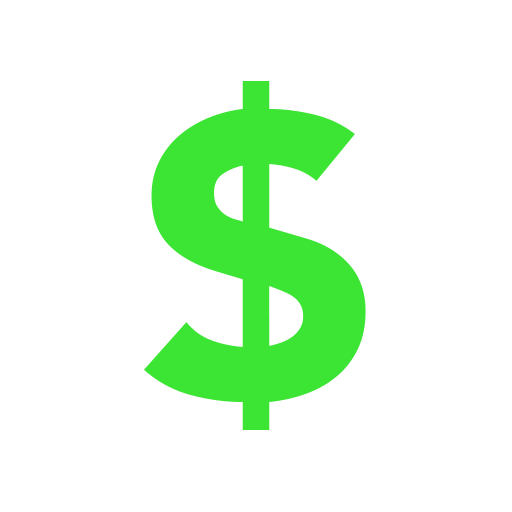
<style>
.page{position:relative;width:512px;height:512px;background:#ffffff}
.page>*{position:absolute;margin:0}
.t1{font:400px "Avenir-Black";color:#3ce434;text-transform:uppercase}
</style>
<div class="page">
<p class="t1" style="left:144px;top:81px;width:222px;height:349px">$</p>
</div>
